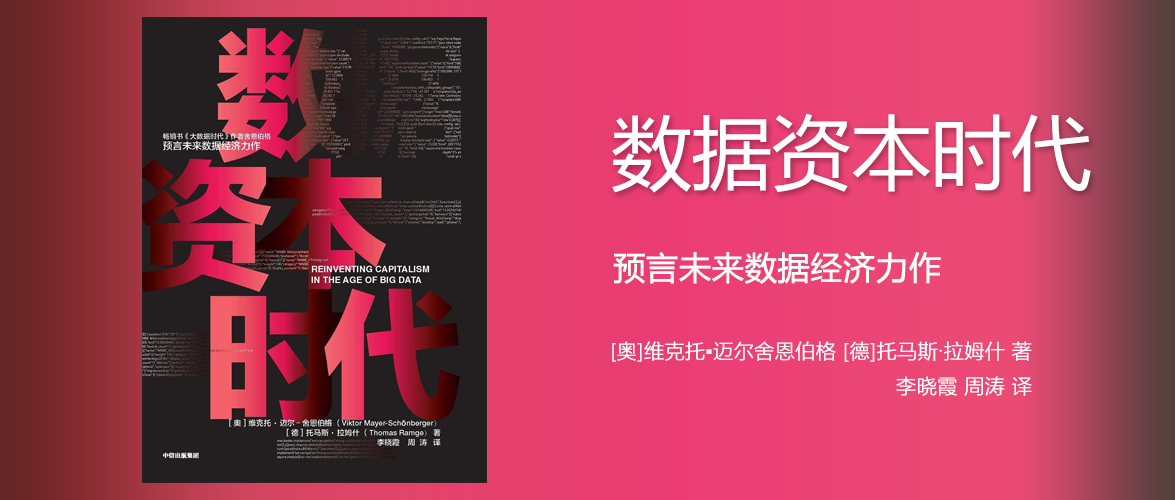
<style>
.page{position:relative;width:1175px;height:500px}
.page>*{position:absolute;margin:0}
.t1{font:80px "MicrosoftYaHei";color:#ffffff}
.t2{font:32px "MicrosoftYaHeiUI";color:#fdfefa;font-weight:bold}
.t3{font:20px "MicrosoftYaHeiUILight";color:#ffffff;font-weight:bold}
</style>
<div class="page">
<p class="t1" style="left:612px;top:113px;width:479px;height:80px">数据资本时代</p>
<p class="t2" style="left:613px;top:251px;width:328px;height:33px">预言未来数据经济力作</p>
<p class="t3" style="left:612px;top:341px;width:420px;height:55px;text-align:right">[奥]维克托▪迈尔舍恩伯格 [德]托马斯·拉姆什 著<br>李晓霞 周涛 译</p>
</div>
